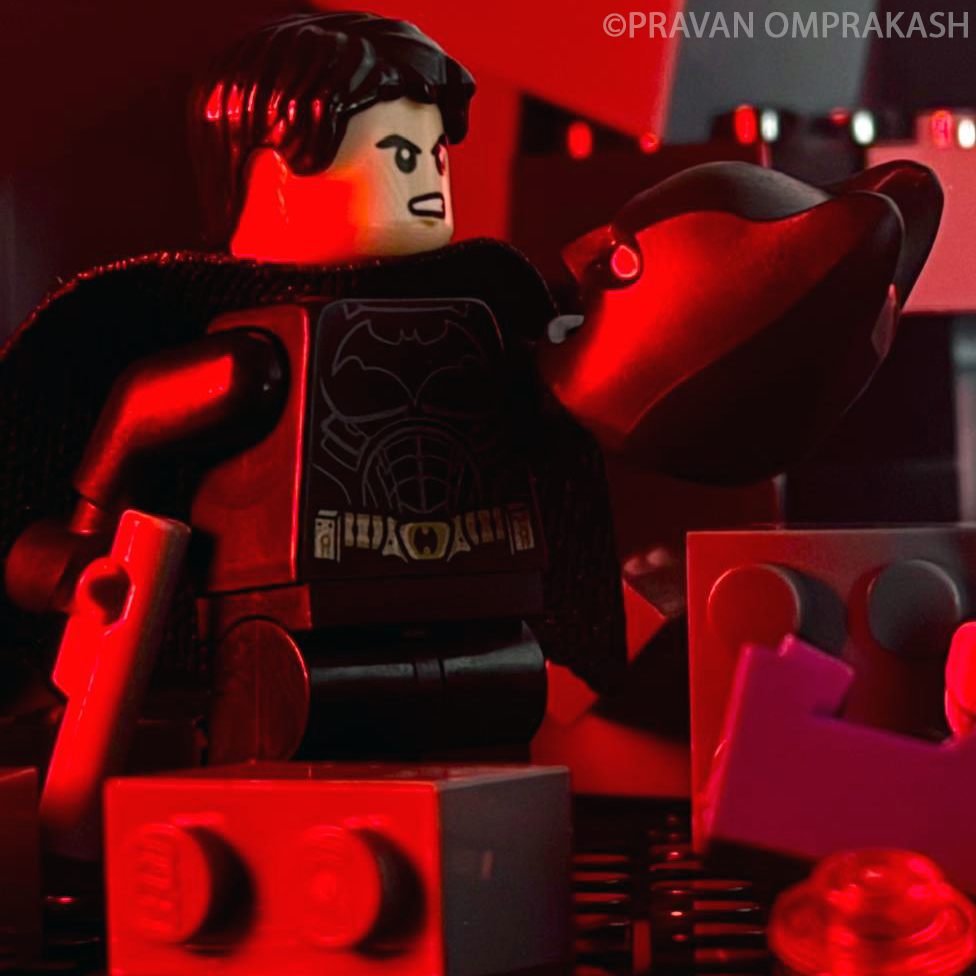
<style>
.page{position:relative;width:976px;height:976px}
.page>*{position:absolute;margin:0}
.t1{font:36px "MyriadPro-Regular";color:#8c8688;font-weight:bold}
</style>
<div class="page">
<p class="t1" style="left:603px;top:12px;width:365px;height:26px">©PRAVAN OMPRAKASH</p>
</div>
